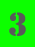
<style>
.page{position:relative;width:35px;height:47px;background:#0cff00}
.page>*{position:absolute;margin:0}
.t1{font:30px "StencilStd";letter-spacing:0.1em;color:#595959}
</style>
<div class="page">
<p class="t1" style="left:9px;top:12px;width:17px;height:24px">3</p>
</div>
